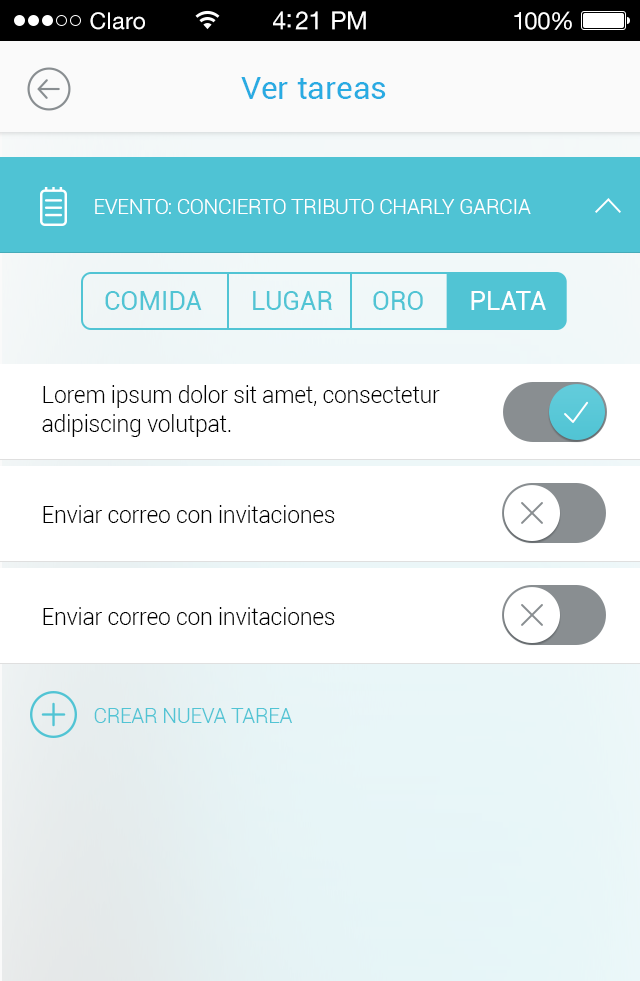
<style>
.page{position:relative;width:640px;height:981px;background:#ffffff}
.page>*{position:absolute;margin:0}
.t1{font:23px "HelveticaNeueLTStd-Roman";letter-spacing:0.02em;color:#ffffff}
.t2{font:25px "HelveticaNeueLTStd-Roman";letter-spacing:-0.02em;color:#ffffff}
.t3{font:24px "HelveticaNeueLTStd-Roman";letter-spacing:-0.02em;color:#ffffff}
.t4{font:32px "Roboto-Regular";color:#29abe2}
.t5{font:20.8px "Roboto-Light";letter-spacing:-0.01em;color:#ffffff}
.t6{font:26px "Roboto-Regular";color:#51c4d4}
.t7{font:26px "Roboto-Regular";color:#ffffff}
.t8{font:22.9px/29.2px "Roboto-Light";letter-spacing:-0.01em;color:#000000}
.t9{font:22.9px "Roboto-Light";letter-spacing:-0.01em;color:#000000}
.t10{font:20.8px "Roboto-Light";letter-spacing:-0.01em;color:#51c4d4}
</style>
<div class="page">
<p class="t1" style="left:90px;top:12px;width:55px;height:18px">Claro</p>
<p class="t2" style="left:273px;top:11px;width:93px;height:19px">4:21 PM</p>
<p class="t3" style="left:514px;top:11px;width:58px;height:19px">100%</p>
<p class="t4" style="left:241px;top:77px;width:145px;height:22px">Ver tareas</p>
<p class="t5" style="left:95px;top:199px;width:436px;height:15px">EVENTO: CONCIERTO TRIBUTO CHARLY GARCIA</p>
<p class="t6" style="left:105px;top:291px;width:97px;height:19px">COMIDA</p>
<p class="t6" style="left:253px;top:291px;width:79px;height:19px">LUGAR</p>
<p class="t6" style="left:373px;top:291px;width:50px;height:19px">ORO</p>
<p class="t7" style="left:471px;top:291px;width:75px;height:19px">PLATA</p>
<p class="t8" style="left:42px;top:385px;width:398px;height:52px">Lorem ipsum dolor sit amet, consectetur <br>adipiscing volutpat.</p>
<p class="t9" style="left:43px;top:505px;width:292px;height:18px">Enviar correo con invitaciones</p>
<p class="t9" style="left:43px;top:607px;width:292px;height:18px">Enviar correo con invitaciones</p>
<p class="t10" style="left:94px;top:708px;width:198px;height:15px">CREAR NUEVA TAREA</p>
</div>
